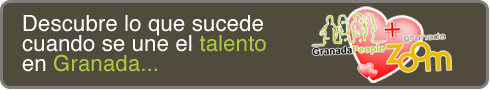
<style>
.page{position:relative;width:490px;height:90px;background:#514b3e}
.page>*{position:absolute;margin:0}
.t1{font:22px/20px "Helvetica";letter-spacing:0.01em;color:#ffffff}
.t2{font:22px/20px "Helvetica";letter-spacing:0.01em;color:#acc83e}
</style>
<div class="page">
<p class="t1" style="left:22px;top:15px;width:244px;height:57px">Descubre lo que sucede cuando se une el <span class="t2">talento <br></span>en <span class="t2">Granada...</span></p>
</div>
